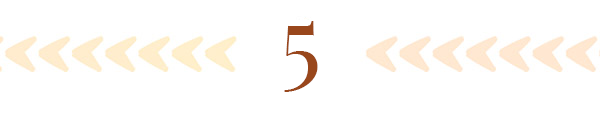
<style>
.page{position:relative;width:600px;height:115px;background:#ffffff}
.page>*{position:absolute;margin:0}
.t1{font:100px "PlayfairDisplay-Regular";color:#99471c}
</style>
<div class="page">
<p class="t1" style="left:284px;top:21px;width:34px;height:71px">5</p>
</div>
